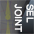
<style>
.page{position:relative;width:34px;height:34px}
.page>*{position:absolute;margin:0}
.t1{font:9.8px "Gautami";letter-spacing:-0.005em;color:#ffffff;text-transform:uppercase;font-weight:bold}
</style>
<div class="page">
<p class="t1" style="left:14px;top:4px;width:20px;height:28px;rotate:90deg">sel<br>joint</p>
</div>
